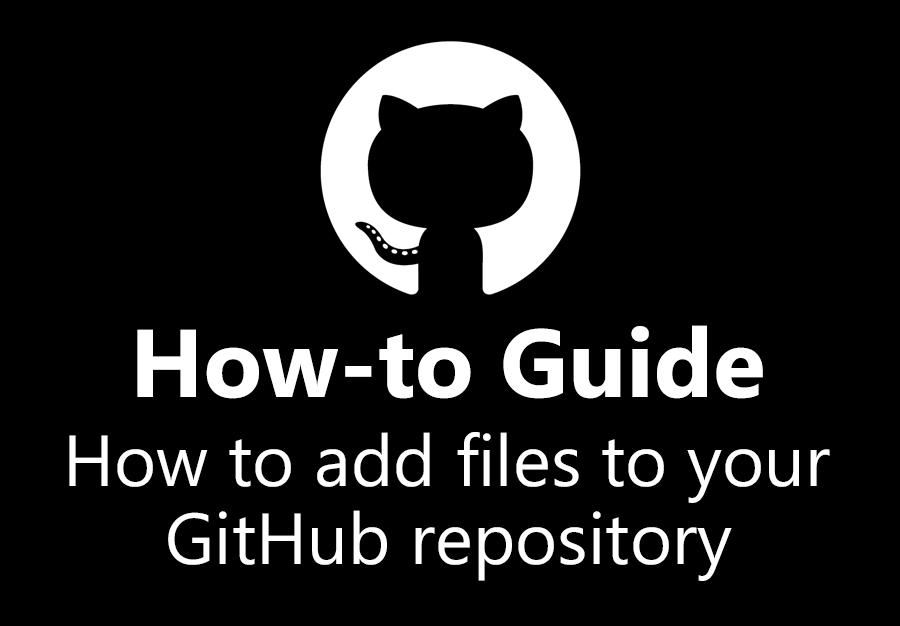
<style>
.page{position:relative;width:900px;height:626px;background:#000000}
.page>*{position:absolute;margin:0}
.t1{font:96px "MicrosoftPhagsPa-Bold";color:#ffffff}
.t2{font:72px "MicrosoftPhagsPa";color:#ffffff}
</style>
<div class="page">
<p class="t1" style="left:137px;top:325px;width:626px;height:74px">How-to Guide</p>
<p class="t2" style="left:69px;top:432px;width:761px;height:71px">How to add files to your</p>
<p class="t2" style="left:168px;top:510px;width:564px;height:71px">GitHub repository</p>
</div>
